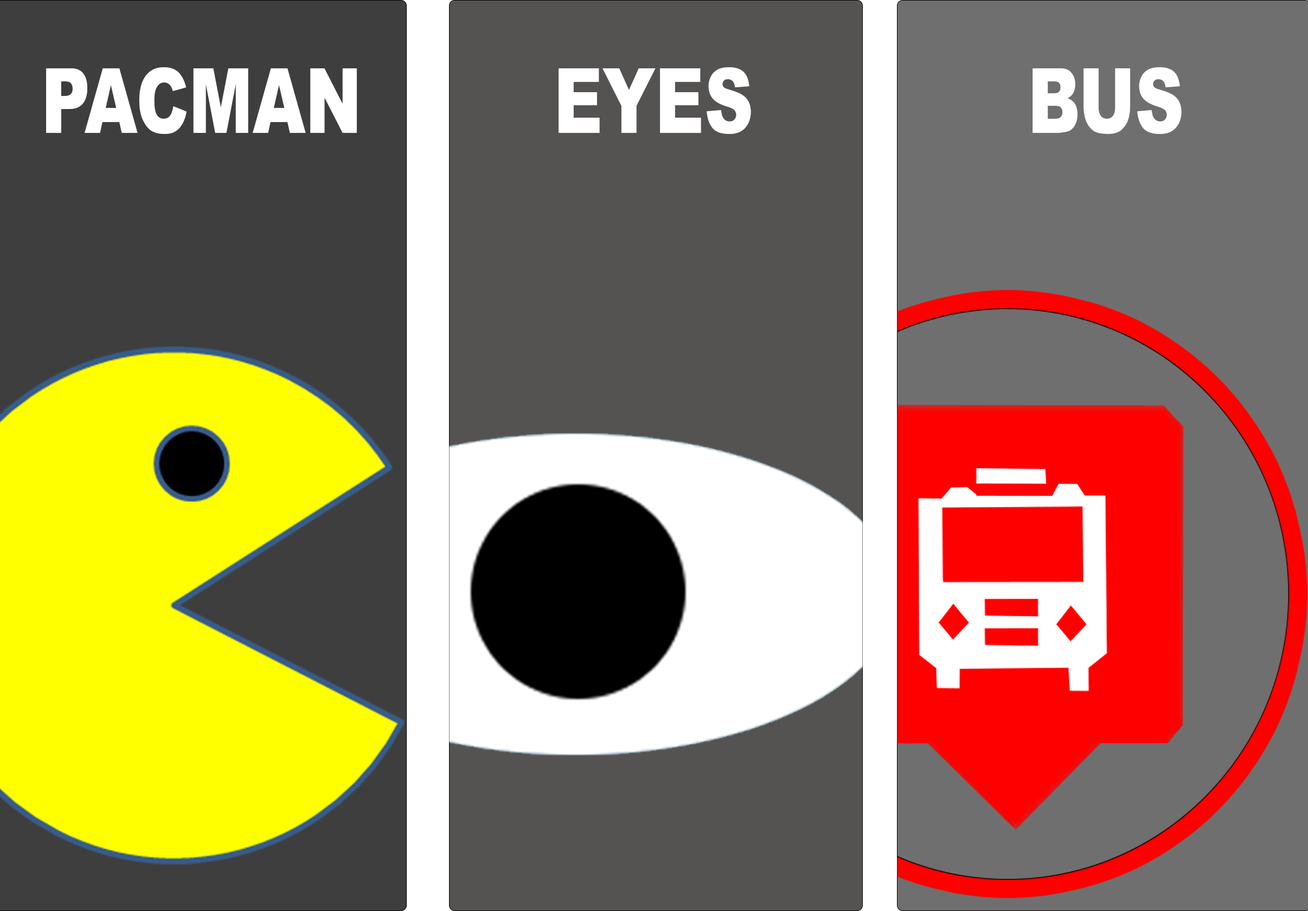
<style>
.page{position:relative;width:1308px;height:911px;background:#555252}
.page>*{position:absolute;margin:0}
.t1{font:90.2px "Arial-Black";color:#ffffff;scale:0.75 1}
</style>
<div class="page">
<p class="t1" style="left:46px;top:67px;width:311px;height:67px">PACMAN</p>
<p class="t1" style="left:559px;top:67px;width:192px;height:67px">EYES</p>
<p class="t1" style="left:1033px;top:67px;width:149px;height:67px">BUS</p>
</div>
